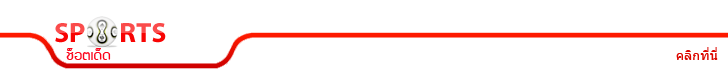
<style>
.page{position:relative;width:728px;height:75px;background:#ffffff}
.page>*{position:absolute;margin:0}
.t1{font:28px "MyriadPro-Bold"}
.t2{font:25.3px "MyriadPro-Regular"}
.t3{font:15.2px "supermarket";letter-spacing:0.005em;color:#fb041b;scale:1.09 1}
.t4{font:15.2px "supermarket";letter-spacing:0.005em;color:#ffffff;scale:1.09 1}
.t5{font:13.3px "KOTSOFT";color:#ffffff}
.t6{font:13.3px "KOTSOFT";color:#dc0800}
</style>
<div class="page">
<p class="t1" style="left:55px;top:23px;width:174px;height:20px">SP      RTS <span class="t2">News</span></p>
<p class="t3" style="left:66px;top:48px;width:82px;height:12px">ช็อตเด็ด<span class="t4">กีฬาดัง</span></p>
<p class="t5" style="left:591px;top:47px;width:127px;height:13px">อ่านข่าวทั้งหมด<span class="t6">คลิกที่นี่</span></p>
</div>
